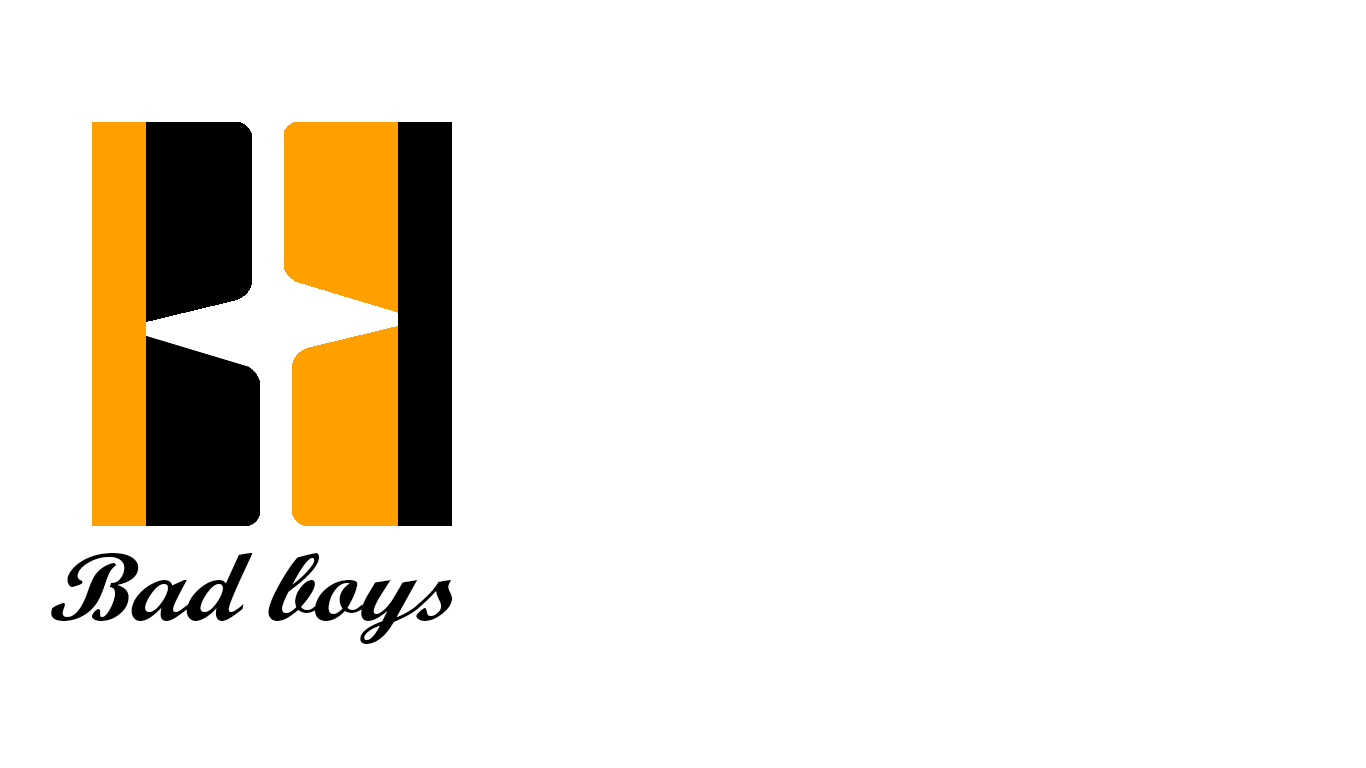
<style>
.page{position:relative;width:1366px;height:768px;background:#ffffff}
.page>*{position:absolute;margin:0}
.t1{font:96.4px "ScriptMTBold";color:#000000;font-style:italic;scale:1.1 1}
</style>
<div class="page">
<p class="t1" style="left:51px;top:553px;width:402px;height:91px">Bad boys</p>
</div>
